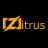
<style>
.page{position:relative;width:48px;height:48px;background:#000000}
.page>*{position:absolute;margin:0}
.t1{font:10.9px "DejaVuSans";color:#ef9f1b}
</style>
<div class="page">
<p class="t1" style="left:22px;top:20px;width:23px;height:10px">itrus</p>
</div>
